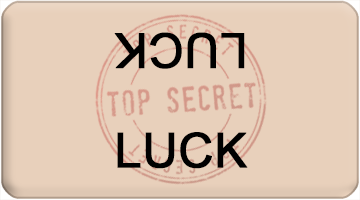
<style>
.page{position:relative;width:360px;height:200px;background:#e8d0bb}
.page>*{position:absolute;margin:0}
.t1{font:48px "ArialMT";color:#000000;font-weight:bold}
</style>
<div class="page">
<p class="t1" style="left:114px;top:32px;width:131px;height:37px;rotate:180deg">LUCK</p>
<p class="t1" style="left:117px;top:132px;width:131px;height:37px">LUCK</p>
</div>
